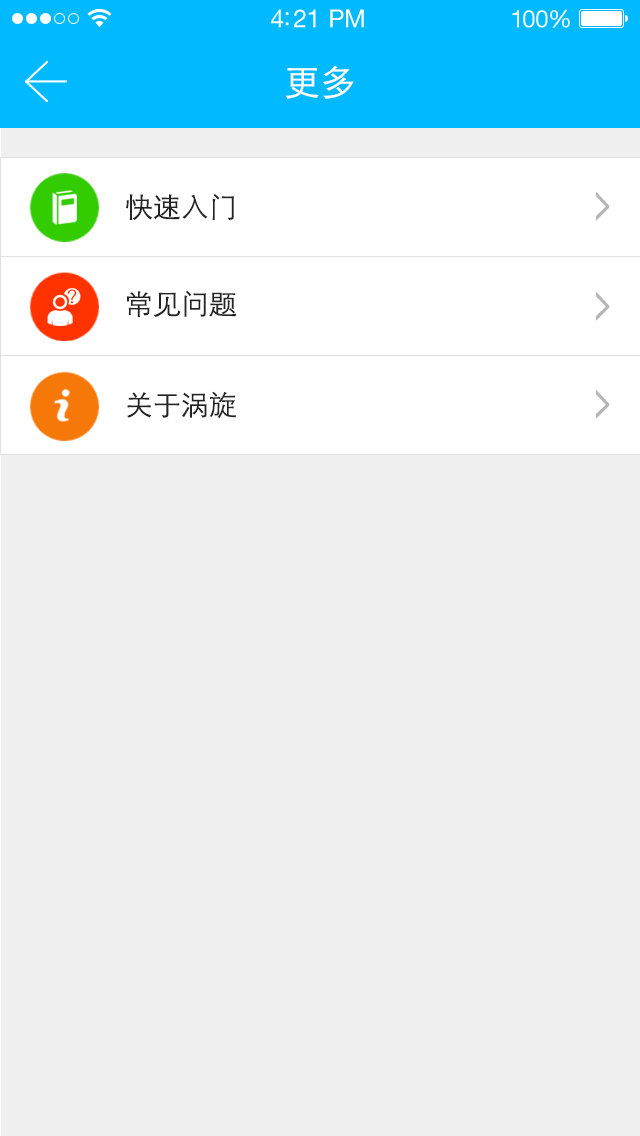
<style>
.page{position:relative;width:640px;height:1136px;background:#f0f0f0}
.page>*{position:absolute;margin:0}
.t1{font:25px "HelveticaNeueLTStd-Roman";letter-spacing:-0.02em;color:#ffffff}
.t2{font:24px "HelveticaNeueLTStd-Roman";letter-spacing:-0.02em;color:#ffffff}
.t3{font:36px "STXihei";color:#ffffff;text-transform:uppercase}
.t4{font:28px "STXihei";color:#232323;text-transform:uppercase}
.t5{font:56.4px "MicrosoftYaHei";color:#b6b6b6;text-transform:uppercase;scale:0.51 1}
</style>
<div class="page">
<p class="t1" style="left:271px;top:9px;width:93px;height:19px">4:21 PM</p>
<p class="t2" style="left:512px;top:9px;width:58px;height:19px">100%</p>
<p class="t3" style="left:285px;top:65px;width:69px;height:34px">更多</p>
<p class="t4" style="left:126px;top:194px;width:108px;height:26px">快速入门</p>
<p class="t5" style="left:596px;top:191px;width:14px;height:30px;rotate:180deg">&lt;</p>
<p class="t4" style="left:127px;top:290px;width:110px;height:27px">常见问题</p>
<p class="t5" style="left:596px;top:291px;width:14px;height:30px;rotate:180deg">&lt;</p>
<p class="t5" style="left:596px;top:389px;width:14px;height:30px;rotate:180deg">&lt;</p>
<p class="t4" style="left:127px;top:391px;width:109px;height:27px">关于涡旋</p>
</div>
